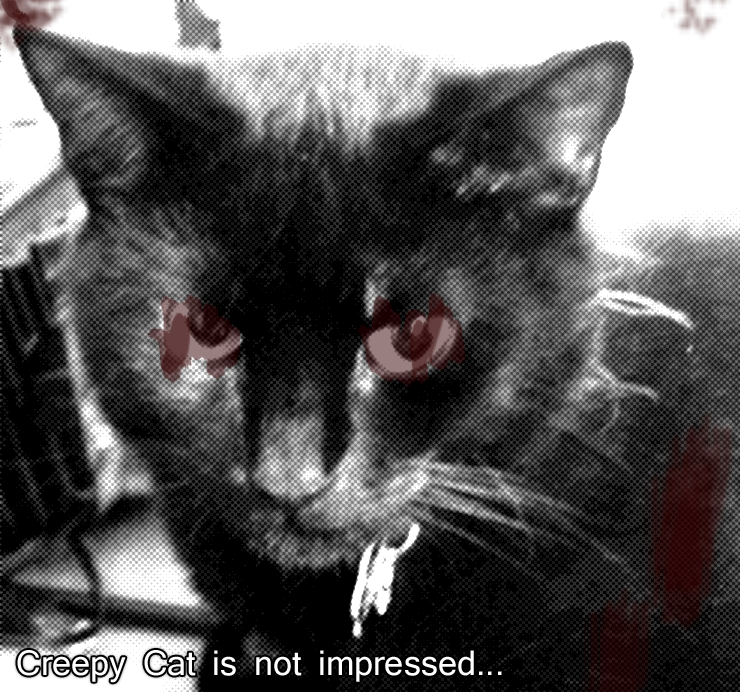
<style>
.page{position:relative;width:740px;height:692px;background:#000000}
.page>*{position:absolute;margin:0}
.t1{font:33px "Mangal";color:#ffffff}
</style>
<div class="page">
<p class="t1" style="left:17px;top:650px;width:485px;height:33px">Creepy Cat is not impressed...</p>
</div>
